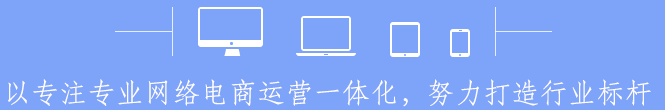
<style>
.page{position:relative;width:665px;height:110px;background:#7da4f8}
.page>*{position:absolute;margin:0}
.t1{font:27.7px "STFangsong";letter-spacing:0.02em;color:#fffcfc}
</style>
<div class="page">
<p class="t1" style="left:8px;top:79px;width:643px;height:28px">以专注专业网络电商运营一体化，努力打造行业标杆</p>
</div>
